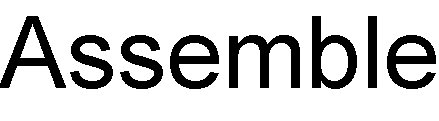
<style>
.page{position:relative;width:439px;height:121px;background:#ffffff}
.page>*{position:absolute;margin:0}
.t1{font:100px "ArialMT";color:#000000}
</style>
<div class="page">
<p class="t1" style="left:0px;top:16px;width:436px;height:73px">Assemble</p>
</div>
